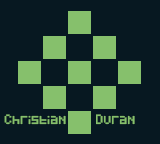
<style>
.page{position:relative;width:160px;height:144px;background:#071821}
.page>*{position:absolute;margin:0}
.t1{font:8px "Pixeled";color:#86c06c}
</style>
<div class="page">
<p class="t1" style="left:4px;top:114px;width:62px;height:11px">Christian</p>
<p class="t1" style="left:96px;top:114px;width:39px;height:11px">Duran</p>
</div>
